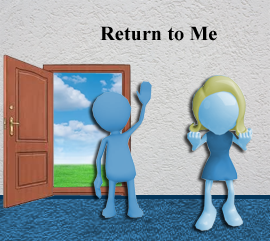
<style>
.page{position:relative;width:270px;height:241px}
.page>*{position:absolute;margin:0}
.t1{font:20.3px "TimesNewRomanPS-BoldMT";color:#000000}
</style>
<div class="page">
<p class="t1" style="left:100px;top:26px;width:117px;height:15px">Return to Me</p>
</div>
